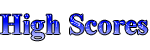
<style>
.page{position:relative;width:150px;height:50px;background:#ffffff}
.page>*{position:absolute;margin:0}
.t1{font:29px "TimesNewRomanPS-BoldMT"}
</style>
<div class="page">
<p class="t1" style="left:0px;top:14px;width:148px;height:27px">High Scores</p>
</div>
